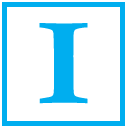
<style>
.page{position:relative;width:128px;height:128px;background:#ffffff}
.page>*{position:absolute;margin:0}
.t1{font:115.7px "CalisMTBol";color:#00aeef;scale:1.12 1}
</style>
<div class="page">
<p class="t1" style="left:39px;top:23px;width:49px;height:81px">I</p>
</div>
